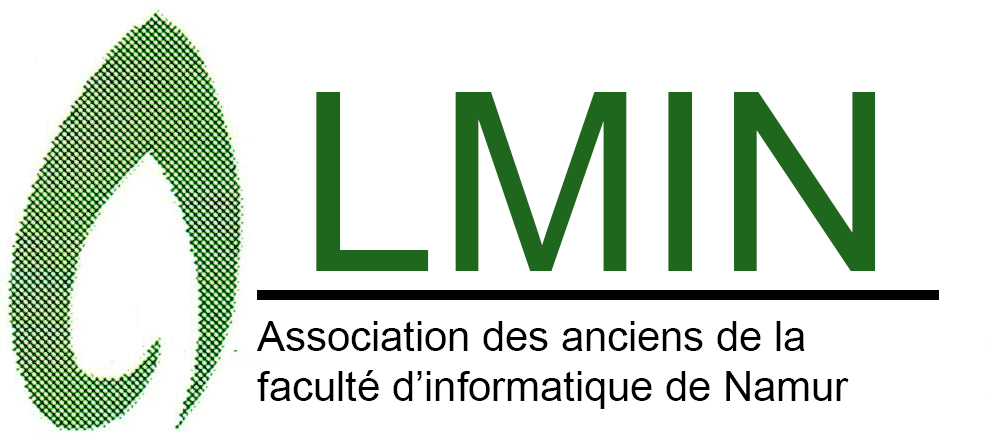
<style>
.page{position:relative;width:985px;height:443px;background:#ffffff}
.page>*{position:absolute;margin:0}
.t1{font:250px "ArialMT";color:#1e671c}
.t2{font:41.7px "ArialMT";color:#000000}
</style>
<div class="page">
<p class="t1" style="left:316px;top:92px;width:560px;height:179px">LMIN</p>
<p class="t2" style="left:256px;top:321px;width:593px;height:88px">Association des anciens de la<br>faculté d’informatique de Namur</p>
</div>
